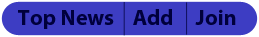
<style>
.page{position:relative;width:259px;height:37px;background:#3d3dc3}
.page>*{position:absolute;margin:0}
.t1{font:22.2px "MyriadPro-Bold";color:#00003c}
</style>
<div class="page">
<p class="t1" style="left:18px;top:10px;width:96px;height:19px">Top News</p>
<p class="t1" style="left:133px;top:9px;width:39px;height:16px">Add</p>
<p class="t1" style="left:195px;top:9px;width:41px;height:16px">Join</p>
</div>
